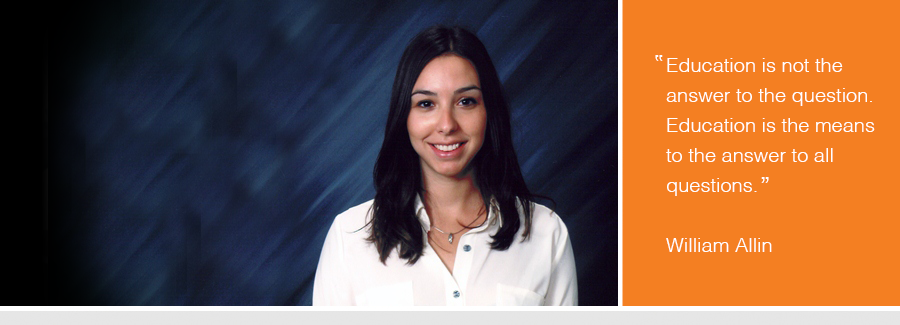
<style>
.page{position:relative;width:900px;height:325px;background:#f47f22}
.page>*{position:absolute;margin:0}
.t1{font:23.9px "Helvetica";color:#ffffff}
.t2{font:20px/30px "Helvetica-Light";color:#ffffff}
.t3{font:24px "Helvetica";color:#ffffff}
</style>
<div class="page">
<p class="t1" style="left:655px;top:55px;width:8px;height:6px;rotate:180deg">”</p>
<p class="t2" style="left:666px;top:58px;width:209px;height:194px">Education is not the<br>answer to the question.<br>Education is the means<br>to the answer to all<br>questions.<br><br>William Allin</p>
<p class="t3" style="left:761px;top:177px;width:8px;height:6px">”</p>
</div>
